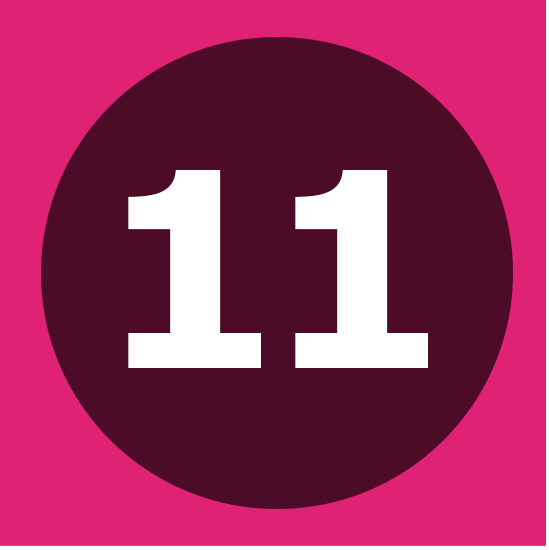
<style>
.page{position:relative;width:549px;height:550px;background:#4c0c27}
.page>*{position:absolute;margin:0}
.t1{font:272.5px "Verdana-Bold";letter-spacing:-0.1em;color:#ffffff}
</style>
<div class="page">
<p class="t1" style="left:128px;top:170px;width:300px;height:198px">11</p>
</div>
